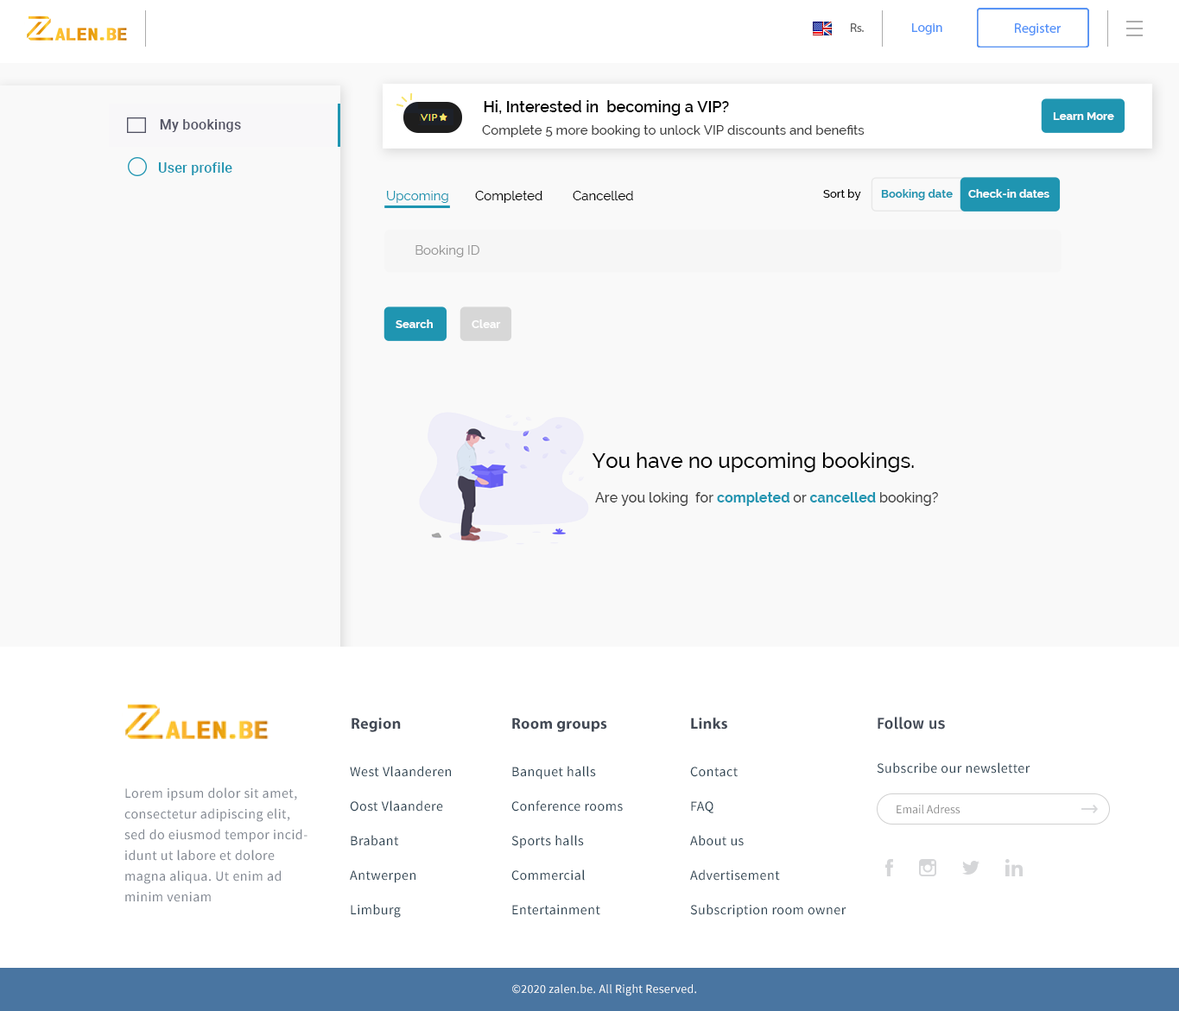
<style>
.page{position:relative;width:1179px;height:1011px;background:#f9f9f9}
.page>*{position:absolute;margin:0}
.t1{font:12.2px "MyriadPro-Regular";color:#636363;scale:1.04 1}
.t2{font:12.7px "MyriadPro-Regular";color:#5392f9;scale:1.07 1}
.t3{font:13.8px "MyriadPro-Regular";color:#5392f9}
.t4{font:15.5px "Raleway-SemiBold";color:#000000}
.t5{font:11.2px "Raleway-Bold";color:#ffffff}
.t6{font:13.7px "Roboto-Medium";letter-spacing:0.02em;color:#525364}
.t7{font:13px "Raleway-Medium";color:#3c3c3c}
.t8{font:13.7px "Roboto-Medium";letter-spacing:0.02em;color:#1f95b1}
.t9{font:13px "Raleway-Regular";color:#1f95b1}
.t10{font:13px "Raleway-Regular";color:#000000}
.t11{font:11.2px "Raleway-Medium";color:#000000}
.t12{font:11.2px "Raleway-Bold";color:#1f95b1}
.t13{font:13px "Raleway-Regular";color:#959595}
.t14{font:20.7px "Raleway-Medium";color:#000000}
.t15{font:13.8px "Raleway-Medium";color:#3c3c3c}
.t16{font:13.8px "Raleway-Bold";color:#1f95b1}
.t17{font:15.5px "MyriadPro-Bold";letter-spacing:0.02em;color:#424955}
.t18{font:15.5px "FiraSans-Medium";letter-spacing:0.02em;color:#424955}
.t19{font:13.8px/34.5px "SourceSansPro-Regular";letter-spacing:0.03em;color:#2e4453}
.t20{font:13.8px "SourceSansPro-Regular";letter-spacing:0.03em;color:#2e4453}
.t21{font:13.8px/20.7px "SourceSansPro-Regular";letter-spacing:0.03em;color:#818791}
.t22{font:12.1px "SourceSansPro-Regular";color:#8c8c8c}
.t23{font:12.1px "SourceSansPro-Regular";letter-spacing:0.02em;color:#ffffff}
</style>
<div class="page">
<p class="t1" style="left:851px;top:23px;width:13px;height:9px">Rs.</p>
<p class="t2" style="left:912px;top:23px;width:30px;height:12px">Login</p>
<p class="t3" style="left:1015px;top:23px;width:46px;height:12px">Register</p>
<p class="t4" style="left:484px;top:100px;width:245px;height:16px">Hi, Interested in  becoming a VIP?</p>
<p class="t5" style="left:1053px;top:112px;width:61px;height:8px">Learn More</p>
<p class="t6" style="left:160px;top:119px;width:81px;height:13px">My bookings</p>
<p class="t7" style="left:482px;top:125px;width:383px;height:12px">Complete 5 more booking to unlock VIP discounts and benefits</p>
<p class="t8" style="left:158px;top:162px;width:74px;height:13px">User profile</p>
<p class="t9" style="left:387px;top:191px;width:61px;height:12px">Upcoming</p>
<p class="t10" style="left:475px;top:191px;width:67px;height:12px">Completed</p>
<p class="t10" style="left:573px;top:191px;width:60px;height:9px">Cancelled</p>
<p class="t11" style="left:823px;top:189px;width:38px;height:11px">Sort by</p>
<p class="t12" style="left:881px;top:189px;width:72px;height:11px">Booking date</p>
<p class="t5" style="left:968px;top:189px;width:81px;height:9px">Check-in dates</p>
<p class="t13" style="left:415px;top:245px;width:64px;height:12px">Booking ID</p>
<p class="t5" style="left:396px;top:320px;width:37px;height:8px">Search</p>
<p class="t5" style="left:472px;top:320px;width:29px;height:8px">Clear</p>
<p class="t14" style="left:592px;top:453px;width:322px;height:19px">You have no upcoming bookings.</p>
<p class="t15" style="left:595px;top:492px;width:343px;height:14px">Are you loking  for <span class="t16">completed </span>or<span class="t16"> cancelled </span>booking?</p>
<p class="t17" style="left:352px;top:718px;width:49px;height:14px">Region</p>
<p class="t17" style="left:512px;top:718px;width:95px;height:14px">Room groups</p>
<p class="t17" style="left:691px;top:718px;width:36px;height:12px">Links</p>
<p class="t18" style="left:878px;top:717px;width:67px;height:13px">Follow us</p>
<p class="t19" style="left:350px;top:766px;width:101px;height:152px">West Vlaanderen<br>Oost Vlaandere<br>Brabant<br>Antwerpen<br>Limburg</p>
<p class="t19" style="left:511px;top:766px;width:112px;height:150px">Banquet halls<br>Conference rooms<br>Sports halls<br>Commercial<br>Entertainment</p>
<p class="t19" style="left:690px;top:767px;width:156px;height:151px">Contact<br>FAQ<br>About us<br>Advertisement<br>Subscription room owner</p>
<p class="t20" style="left:877px;top:763px;width:153px;height:11px">Subscribe our newsletter</p>
<p class="t21" style="left:124px;top:788px;width:183px;height:115px">Lorem ipsum dolor sit amet, consectetur adipiscing elit, sed do eiusmod tempor incididunt ut labore et dolore magna aliqua. Ut enim ad minim veniam</p>
<p class="t22" style="left:897px;top:805px;width:63px;height:9px">Email Adress</p>
<p class="t23" style="left:512px;top:985px;width:184px;height:12px">©2020 zalen.be. All Right Reserved.</p>
</div>
